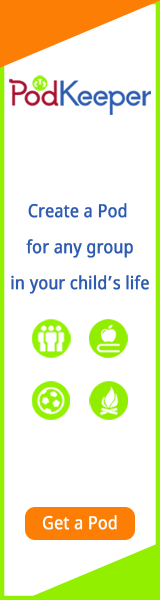
<style>
.page{position:relative;width:160px;height:600px;background:#ffffff}
.page>*{position:absolute;margin:0}
.t1{font:18px/36px "NotoSans";color:#2e5baf;font-weight:bold;scale:0.88 1}
.t2{font:18px "NotoSans";color:#feffff;font-weight:bold;scale:0.88 1}
</style>
<div class="page">
<p class="t1" style="left:11px;top:203px;width:138px;height:91px;text-align:center">Create a Pod <br>for any group<br>in your child’s life</p>
<p class="t2" style="left:42px;top:515px;width:75px;height:15px">Get a Pod</p>
</div>
